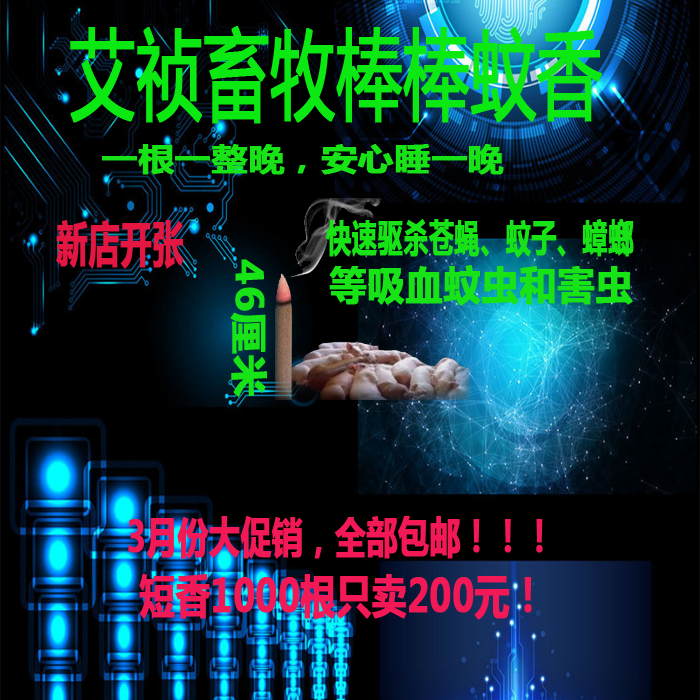
<style>
.page{position:relative;width:700px;height:700px;background:#000000}
.page>*{position:absolute;margin:0}
.t1{font:96.7px "MicrosoftYaHei";color:#0ce811;font-weight:bold;scale:0.67 1}
.t2{font:30.8px "MicrosoftYaHei-Bold";color:#17e317;font-weight:bold;scale:1.16 1}
.t3{font:48.5px "MicrosoftYaHei-Bold";color:#e31742;font-weight:bold;scale:0.64 1}
.t4{font:37.8px "MicrosoftYaHei-Bold";color:#17e317;font-weight:bold;scale:0.66 1}
.t5{font:36.8px "MicrosoftYaHei-Bold";color:#17e317;font-weight:bold;scale:1.12 1}
.t6{font:40.5px "MicrosoftYaHei-Bold";color:#17e317;font-weight:bold;scale:0.91 1}
.t7{font:43.2px "MicrosoftYaHei-Bold";color:#f31956;font-weight:bold;scale:0.71 1}
.t8{font:45.8px "MicrosoftYaHei-Bold";color:#f31956;font-weight:bold;scale:0.76 1}
</style>
<div class="page">
<p class="t1" style="left:70px;top:26px;width:532px;height:98px">艾祯畜牧棒棒蚊香</p>
<p class="t2" style="left:102px;top:144px;width:402px;height:31px">一根一整晚，安心睡一晚</p>
<p class="t3" style="left:56px;top:220px;width:128px;height:49px">新店开张</p>
<p class="t4" style="left:326px;top:219px;width:308px;height:39px">快速驱杀苍蝇、蚊子、蟑螂</p>
<p class="t5" style="left:230px;top:259px;width:37px;height:138px;rotate:90deg">46厘米</p>
<p class="t6" style="left:329px;top:265px;width:304px;height:41px">等吸血蚊虫和害虫</p>
<p class="t7" style="left:128px;top:516px;width:415px;height:43px">3月份大促销，全部包邮！！！</p>
<p class="t8" style="left:139px;top:574px;width:393px;height:46px">短香1000根只卖200元！</p>
</div>
